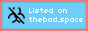
<style>
.page{position:relative;width:88px;height:31px;background:#6dcff6}
.page>*{position:absolute;margin:0}
.t1{font:8px "04b03";color:#fffefe}
</style>
<div class="page">
<p class="t1" style="left:29px;top:8px;width:54px;height:16px">Listed on<br>thebad.space</p>
</div>
